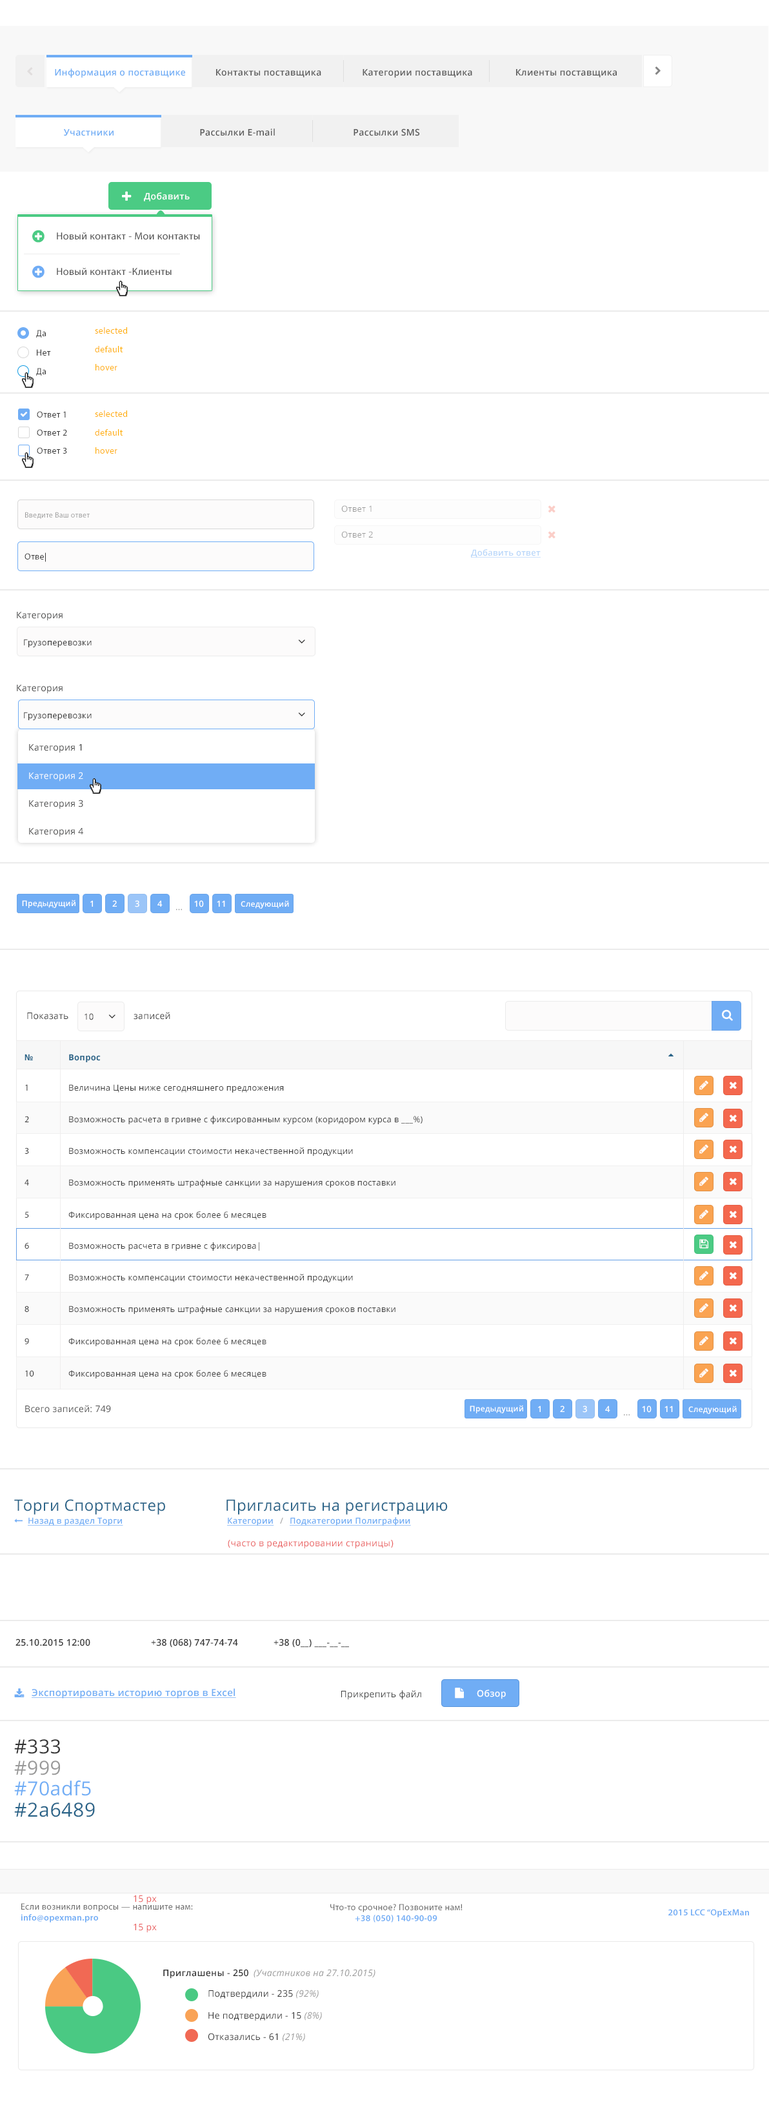
<style>
.page{position:relative;width:769px;height:2109px;background:#ffffff}
.page>*{position:absolute;margin:0}
.t1{font:9px "OpenSans-Semibold";letter-spacing:0.025em;color:#6fadf5}
.t2{font:9px "OpenSans-Semibold";letter-spacing:0.025em;color:#5a5a5a}
.t3{font:9px "OpenSans-Semibold";letter-spacing:0.025em;color:#ffffff}
.t4{font:10.3px "MyriadPro-Regular";letter-spacing:0.025em;color:#4c4c4c}
.t5{font:9px "MyriadPro-Regular";letter-spacing:0.025em;color:#3a3a3a}
.t6{font:9px "MyriadPro-Regular";letter-spacing:0.025em;color:#ffae00}
.t7{font:8.4px "OpenSans";letter-spacing:0.025em;color:#9b9b9b}
.t8{font:7.7px "MyriadPro-Regular";letter-spacing:0.025em;color:#999999}
.t9{font:8.4px "OpenSans-Semibold";letter-spacing:0.025em;color:#b7d6fa;text-decoration:underline}
.t10{font:9px "OpenSans";letter-spacing:0.025em;color:#373838}
.t11{font:8.4px "OpenSans";letter-spacing:0.025em;color:#333333}
.t12{font:9px "OpenSans";letter-spacing:0.025em;color:#ffffff}
.t13{font:7.7px "OpenSans-Semibold";letter-spacing:0.025em;color:#ffffff}
.t14{font:8.4px "OpenSans-Semibold";letter-spacing:0.025em;color:#ffffff}
.t15{font:8.4px "OpenSans";letter-spacing:0.025em;color:#999999}
.t16{font:9px "OpenSans";letter-spacing:0.025em;color:#333333}
.t17{font:8.4px "OpenSans-Bold";letter-spacing:0.025em;color:#2a6589}
.t18{font:8.4px "OpenSans";letter-spacing:0.025em;color:#3a3a3a}
.t19{font:9px "OpenSans";letter-spacing:0.025em;color:#4c4c4c}
.t20{font:15.4px "OpenSans";letter-spacing:0.025em;color:#2a6489}
.t21{font:8.4px "OpenSans-Semibold";letter-spacing:0.025em;color:#70adf5;text-decoration:underline}
.t22{font:8.4px "OpenSans-Semibold";letter-spacing:0.025em;color:#afafaf}
.t23{font:9px "OpenSans";letter-spacing:0.025em;color:#e95a5a}
.t24{font:9px "OpenSans-Semibold";letter-spacing:0.025em;color:#333333}
.t25{font:9.6px "OpenSans-Semibold";letter-spacing:0.025em;color:#70adf5;text-decoration:underline}
.t26{font:19.3px "OpenSans";letter-spacing:0.025em;color:#333333}
.t27{font:19.3px "OpenSans";letter-spacing:0.025em;color:#999999}
.t28{font:19.3px "OpenSans";letter-spacing:0.025em;color:#70adf5}
.t29{font:19.3px "OpenSans";letter-spacing:0.025em;color:#2a6489}
.t30{font:9px "MyriadPro-Regular";letter-spacing:0.025em;color:#696969}
.t31{font:9px "MyriadPro-Semibold";letter-spacing:0.025em;color:#6facf5}
.t32{font:9px "OpenSans-Italic";letter-spacing:0.025em;color:#999999}
</style>
<div class="page">
<p class="t1" style="left:55px;top:68px;width:130px;height:10px">Информация о поставщике</p>
<p class="t2" style="left:216px;top:69px;width:105px;height:8px">Контакты поставщика</p>
<p class="t2" style="left:363px;top:69px;width:109px;height:9px">Категории поставщика</p>
<p class="t2" style="left:516px;top:69px;width:101px;height:8px">Клиенты поставщика</p>
<p class="t1" style="left:64px;top:129px;width:50px;height:7px">Участники</p>
<p class="t2" style="left:200px;top:128px;width:75px;height:8px">Рассылки E-mail</p>
<p class="t2" style="left:354px;top:128px;width:66px;height:8px">Рассылки SMS</p>
<p class="t3" style="left:144px;top:192px;width:46px;height:9px">Добавить</p>
<p class="t4" style="left:57px;top:232px;width:143px;height:8px">Новый контакт - Мои контакты</p>
<p class="t4" style="left:57px;top:268px;width:115px;height:8px">Новый контакт -Клиенты</p>
<p class="t5" style="left:36px;top:330px;width:10px;height:8px">Да</p>
<p class="t6" style="left:95px;top:327px;width:32px;height:7px">selected</p>
<p class="t5" style="left:37px;top:349px;width:14px;height:7px">Нет</p>
<p class="t6" style="left:95px;top:346px;width:28px;height:6px">default</p>
<p class="t6" style="left:95px;top:364px;width:22px;height:6px">hover</p>
<p class="t5" style="left:36px;top:368px;width:10px;height:8px">Да</p>
<p class="t5" style="left:37px;top:411px;width:29px;height:6px">Ответ 1</p>
<p class="t6" style="left:95px;top:410px;width:32px;height:7px">selected</p>
<p class="t5" style="left:37px;top:429px;width:30px;height:7px">Ответ 2</p>
<p class="t6" style="left:95px;top:429px;width:28px;height:7px">default</p>
<p class="t5" style="left:37px;top:447px;width:30px;height:7px">Ответ 3</p>
<p class="t6" style="left:95px;top:447px;width:22px;height:7px">hover</p>
<p class="t7" style="left:341px;top:505px;width:31px;height:7px">Ответ 1</p>
<p class="t8" style="left:25px;top:512px;width:65px;height:7px">Введите Ваш ответ</p>
<p class="t7" style="left:341px;top:531px;width:32px;height:7px">Ответ 2</p>
<p class="t5" style="left:25px;top:552px;width:21px;height:10px">Отве|</p>
<p class="t9" style="left:471px;top:549px;width:70px;height:9px">Добавить ответ</p>
<p class="t10" style="left:17px;top:612px;width:46px;height:9px">Категория</p>
<p class="t11" style="left:24px;top:639px;width:68px;height:8px">Грузоперевозки</p>
<p class="t10" style="left:17px;top:685px;width:46px;height:9px">Категория</p>
<p class="t11" style="left:24px;top:712px;width:68px;height:8px">Грузоперевозки</p>
<p class="t10" style="left:29px;top:744px;width:53px;height:9px">Категория 1</p>
<p class="t12" style="left:29px;top:772px;width:54px;height:9px">Категория 2</p>
<p class="t10" style="left:29px;top:799px;width:54px;height:10px">Категория 3</p>
<p class="t10" style="left:29px;top:828px;width:54px;height:9px">Категория 4</p>
<p class="t13" style="left:22px;top:900px;width:53px;height:8px">Предыдущий</p>
<p class="t14" style="left:90px;top:900px;width:3px;height:7px">1</p>
<p class="t14" style="left:112px;top:900px;width:5px;height:7px">2</p>
<p class="t14" style="left:135px;top:900px;width:4px;height:7px">3</p>
<p class="t14" style="left:157px;top:900px;width:6px;height:7px">4</p>
<p class="t14" style="left:194px;top:900px;width:10px;height:7px">10</p>
<p class="t14" style="left:217px;top:900px;width:8px;height:7px">11</p>
<p class="t13" style="left:241px;top:900px;width:48px;height:9px">Следующий</p>
<p class="t15" style="left:176px;top:909px;width:6px;height:1px">...</p>
<p class="t16" style="left:27px;top:1012px;width:41px;height:8px">Показать</p>
<p class="t11" style="left:85px;top:1013px;width:9px;height:7px">10</p>
<p class="t16" style="left:134px;top:1012px;width:36px;height:8px">записей</p>
<p class="t17" style="left:25px;top:1054px;width:8px;height:6px">№</p>
<p class="t17" style="left:69px;top:1054px;width:32px;height:8px">Вопрос</p>
<p class="t5" style="left:25px;top:1084px;width:3px;height:7px">1</p>
<p class="t18" style="left:69px;top:1084px;width:215px;height:8px">Величина Цены ниже сегодняшнего предложения</p>
<p class="t5" style="left:25px;top:1116px;width:4px;height:6px">2</p>
<p class="t18" style="left:69px;top:1116px;width:354px;height:8px">Возможность расчета в гривне с фиксированным курсом (коридором курса в ___%)</p>
<p class="t5" style="left:25px;top:1147px;width:4px;height:7px">3</p>
<p class="t18" style="left:69px;top:1147px;width:284px;height:9px">Возможность компенсации стоимости некачественной продукции</p>
<p class="t5" style="left:25px;top:1179px;width:4px;height:6px">4</p>
<p class="t18" style="left:69px;top:1179px;width:327px;height:8px">Возможность применять штрафные санкции за нарушения сроков поставки</p>
<p class="t5" style="left:25px;top:1211px;width:4px;height:7px">5</p>
<p class="t18" style="left:68px;top:1211px;width:198px;height:9px">Фиксированная цена на срок более 6 месяцев</p>
<p class="t5" style="left:25px;top:1242px;width:4px;height:7px">6</p>
<p class="t18" style="left:69px;top:1242px;width:190px;height:9px">Возможность расчета в гривне с фиксирова|</p>
<p class="t5" style="left:25px;top:1274px;width:4px;height:6px">7</p>
<p class="t18" style="left:69px;top:1274px;width:284px;height:8px">Возможность компенсации стоимости некачественной продукции</p>
<p class="t5" style="left:25px;top:1305px;width:4px;height:7px">8</p>
<p class="t18" style="left:69px;top:1305px;width:327px;height:9px">Возможность применять штрафные санкции за нарушения сроков поставки</p>
<p class="t5" style="left:25px;top:1338px;width:4px;height:6px">9</p>
<p class="t18" style="left:68px;top:1338px;width:198px;height:8px">Фиксированная цена на срок более 6 месяцев</p>
<p class="t5" style="left:25px;top:1370px;width:9px;height:6px">10</p>
<p class="t18" style="left:68px;top:1370px;width:198px;height:8px">Фиксированная цена на срок более 6 месяцев</p>
<p class="t19" style="left:25px;top:1405px;width:86px;height:7px">Всего записей: 749</p>
<p class="t13" style="left:470px;top:1405px;width:53px;height:8px">Предыдущий</p>
<p class="t14" style="left:538px;top:1405px;width:3px;height:7px">1</p>
<p class="t14" style="left:560px;top:1405px;width:5px;height:7px">2</p>
<p class="t14" style="left:583px;top:1405px;width:4px;height:7px">3</p>
<p class="t14" style="left:605px;top:1405px;width:5px;height:7px">4</p>
<p class="t14" style="left:642px;top:1405px;width:10px;height:7px">10</p>
<p class="t14" style="left:665px;top:1405px;width:8px;height:7px">11</p>
<p class="t13" style="left:689px;top:1405px;width:48px;height:9px">Следующий</p>
<p class="t15" style="left:624px;top:1414px;width:6px;height:2px">...</p>
<p class="t20" style="left:14px;top:1499px;width:151px;height:15px">Торги Спортмастер</p>
<p class="t20" style="left:226px;top:1499px;width:222px;height:15px">Пригласить на регистрацию</p>
<p class="t21" style="left:28px;top:1517px;width:95px;height:8px">Назад в раздел Торги</p>
<p class="t21" style="left:227px;top:1517px;width:47px;height:8px">Категории</p>
<p class="t22" style="left:280px;top:1517px;width:3px;height:6px">/</p>
<p class="t21" style="left:290px;top:1517px;width:121px;height:8px">Подкатегории Полиграфии</p>
<p class="t23" style="left:228px;top:1540px;width:166px;height:9px">(часто в редактировании страницы)</p>
<p class="t24" style="left:15px;top:1638px;width:75px;height:8px">25.10.2015 12:00</p>
<p class="t24" style="left:151px;top:1638px;width:87px;height:9px">+38 (068) 747-74-74</p>
<p class="t24" style="left:274px;top:1638px;width:75px;height:9px">+38 (0__) ___-__-__</p>
<p class="t25" style="left:32px;top:1688px;width:204px;height:10px">Экспортировать историю торгов в Excel</p>
<p class="t10" style="left:341px;top:1690px;width:80px;height:10px">Прикрепить файл</p>
<p class="t3" style="left:477px;top:1689px;width:29px;height:10px">Обзор</p>
<p class="t26" style="left:14px;top:1739px;width:46px;height:15px">#333</p>
<p class="t27" style="left:14px;top:1760px;width:46px;height:15px">#999</p>
<p class="t28" style="left:14px;top:1780px;width:77px;height:16px">#70adf5</p>
<p class="t29" style="left:14px;top:1802px;width:81px;height:15px">#2a6489</p>
<p class="t23" style="left:134px;top:1895px;width:23px;height:9px">15 px</p>
<p class="t30" style="left:21px;top:1903px;width:172px;height:19px">Если возникли вопросы — напишите нам:<br><span class="t31">info@opexman.pro</span></p>
<p class="t30" style="left:330px;top:1904px;width:133px;height:18px;text-align:center">Что-то срочное? Позвоните нам!<br><span class="t31">+38 (050) 140-90-09</span></p>
<p class="t31" style="left:668px;top:1909px;width:81px;height:8px">2015 LCC “OpExMan</p>
<p class="t23" style="left:134px;top:1924px;width:23px;height:9px">15 px</p>
<p class="t24" style="left:163px;top:1969px;width:85px;height:9px">Приглашены - 250</p>
<p class="t32" style="left:254px;top:1969px;width:122px;height:9px">(Участников на 27.10.2015)</p>
<p class="t16" style="left:208px;top:1989px;width:111px;height:10px">Подтвердили - 235 <span class="t32">(92%)</span></p>
<p class="t16" style="left:208px;top:2011px;width:114px;height:10px">Не подтвердили - 15<span class="t32"> (8%)</span></p>
<p class="t16" style="left:208px;top:2033px;width:97px;height:9px">Отказались - 61 <span class="t32">(21%)</span></p>
</div>
